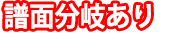
<style>
.page{position:relative;width:170px;height:42px;background:#ffffff}
.page>*{position:absolute;margin:0}
.t1{font:27.3px "KozGoPr6N-Bold";color:#ffffff;scale:0.93 1}
</style>
<div class="page">
<p class="t1" style="left:4px;top:2px;width:147px;height:27px">譜面分岐あり</p>
</div>
